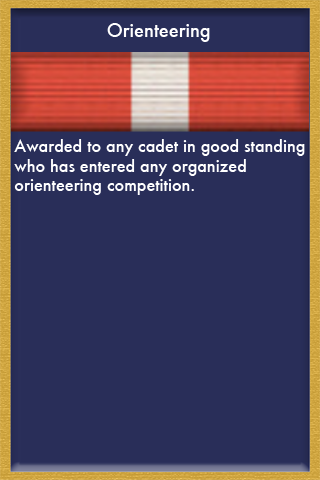
<style>
.page{position:relative;width:320px;height:480px;background:#292e59}
.page>*{position:absolute;margin:0}
.t1{font:18px "Futura-Medium";color:#ffffff}
.t2{font:16px "Futura-Medium";color:#ffffff}
</style>
<div class="page">
<p class="t1" style="left:107px;top:23px;width:103px;height:19px">Orienteering</p>
<p class="t2" style="left:14px;top:139px;width:291px;height:56px">Awarded to any cadet in good standing <br>who has entered any organized <br>orienteering competition.</p>
</div>
